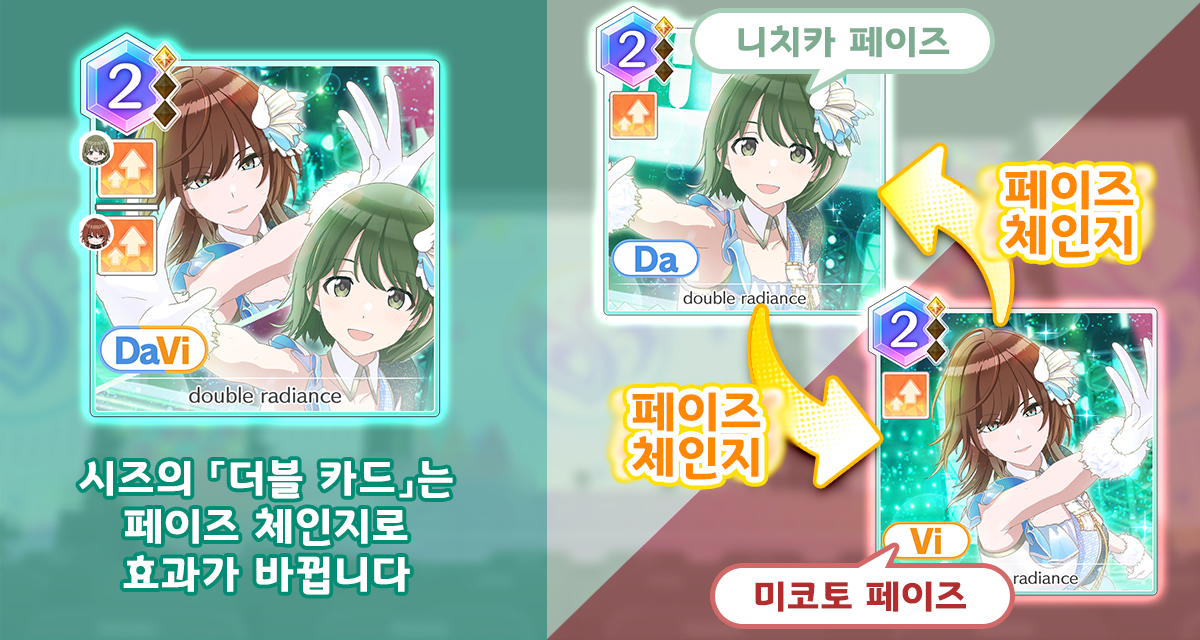
<style>
.page{position:relative;width:1200px;height:640px}
.page>*{position:absolute;margin:0}
.t1{font:37.3px "GyeonggiTitleB";letter-spacing:0.05em;color:#7dac90}
.t2{font:48px/45.3px "GyeonggiTitleB";letter-spacing:0.05em;color:#fe8800}
.t3{font:42.7px/48px "GyeonggiTitleB";letter-spacing:0.05em;color:#ffffff}
.t4{font:37.3px "GyeonggiTitleB";letter-spacing:0.05em;color:#b42d2e}
</style>
<div class="page">
<p class="t1" style="left:738px;top:25px;width:212px;height:33px">니치카 페이즈</p>
<p class="t2" style="left:1005px;top:170px;width:129px;height:88px;text-align:center">페이즈<br>체인지</p>
<p class="t2" style="left:632px;top:392px;width:129px;height:88px;text-align:center">페이즈<br>체인지</p>
<p class="t3" style="left:79px;top:460px;width:374px;height:135px;text-align:center">시즈의 「더블 카드」는<br>페이즈 체인지로<br>효과가 바뀝니다</p>
<p class="t4" style="left:755px;top:581px;width:211px;height:31px">미코토 페이즈</p>
</div>
